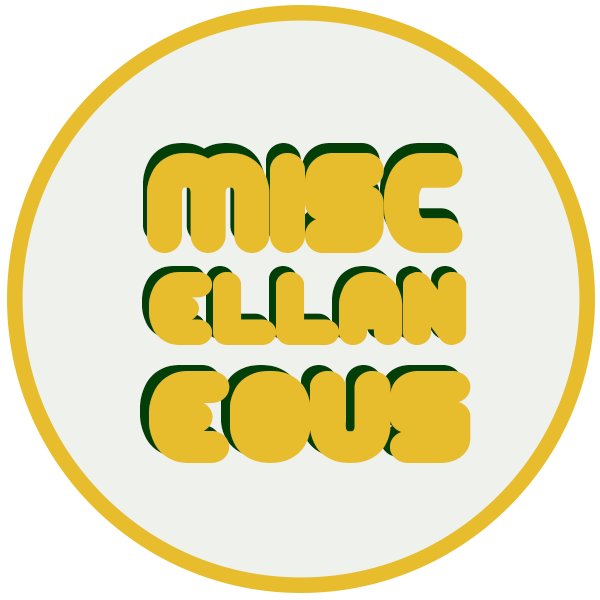
<style>
.page{position:relative;width:600px;height:600px;background:#eff1ed}
.page>*{position:absolute;margin:0}
.t1{font:137.1px "AltRetroBlack";color:#e7bd2e;text-transform:uppercase}
.t2{font:99.4px "AltRetroBlack";color:#e7bd2e;text-transform:uppercase;scale:1.11 1}
.t3{font:125.6px "AltRetroBlack";color:#e7bd2e;text-transform:uppercase;scale:1.11 1}
</style>
<div class="page">
<p class="t1" style="left:143px;top:143px;width:316px;height:100px">misc</p>
<p class="t1" style="left:147px;top:153px;width:316px;height:100px">misc</p>
<p class="t2" style="left:142px;top:266px;width:318px;height:73px">ellan</p>
<p class="t2" style="left:149px;top:272px;width:318px;height:73px">ellan</p>
<p class="t3" style="left:140px;top:365px;width:322px;height:92px">eous</p>
<p class="t3" style="left:149px;top:371px;width:322px;height:92px">eous</p>
</div>
